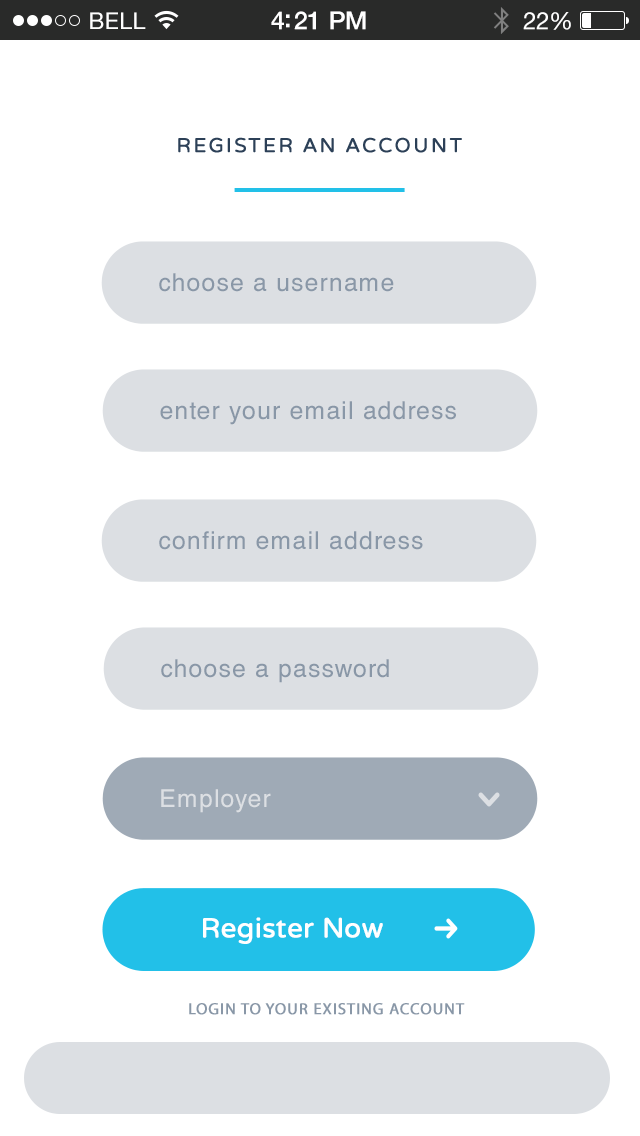
<style>
.page{position:relative;width:640px;height:1136px;background:#ffffff}
.page>*{position:absolute;margin:0}
.t1{font:23px "HelveticaNeue";letter-spacing:0.02em;color:#ffffff}
.t2{font:25px "HelveticaNeue-Medium";letter-spacing:-0.02em;color:#ffffff}
.t3{font:24px "HelveticaNeue";letter-spacing:-0.02em;color:#ffffff}
.t4{font:20px "VarelaRound";letter-spacing:0.1em;color:#2c4057;font-weight:bold}
.t5{font:24.7px "HelveticaCE-Regular";letter-spacing:0.05em;color:#8997a7}
.t6{font:24.7px "HelveticaCE-Regular";letter-spacing:0.05em;color:#dcdfe3}
.t7{font:27.1px "VarelaRound";color:#ffffff;font-weight:bold}
.t8{font:16px "MyriadPro-Regular";letter-spacing:0.05em;color:#8997a7;font-weight:bold}
</style>
<div class="page">
<p class="t1" style="left:90px;top:12px;width:56px;height:17px">BELL</p>
<p class="t2" style="left:271px;top:11px;width:95px;height:19px">4:21 PM</p>
<p class="t3" style="left:523px;top:12px;width:48px;height:18px">22%</p>
<p class="t4" style="left:178px;top:137px;width:284px;height:16px">REGISTER AN ACCOUNT</p>
<p class="t5" style="left:159px;top:273px;width:235px;height:19px">choose a username</p>
<p class="t5" style="left:160px;top:401px;width:296px;height:24px">enter your email address</p>
<p class="t5" style="left:159px;top:531px;width:264px;height:19px">confirm email address</p>
<p class="t5" style="left:161px;top:659px;width:228px;height:24px">choose a password</p>
<p class="t6" style="left:161px;top:789px;width:110px;height:24px">Employer</p>
<p class="t7" style="left:203px;top:917px;width:180px;height:27px">Register Now</p>
<p class="t8" style="left:189px;top:1003px;width:276px;height:12px">LOGIN TO YOUR EXISTING ACCOUNT</p>
</div>
